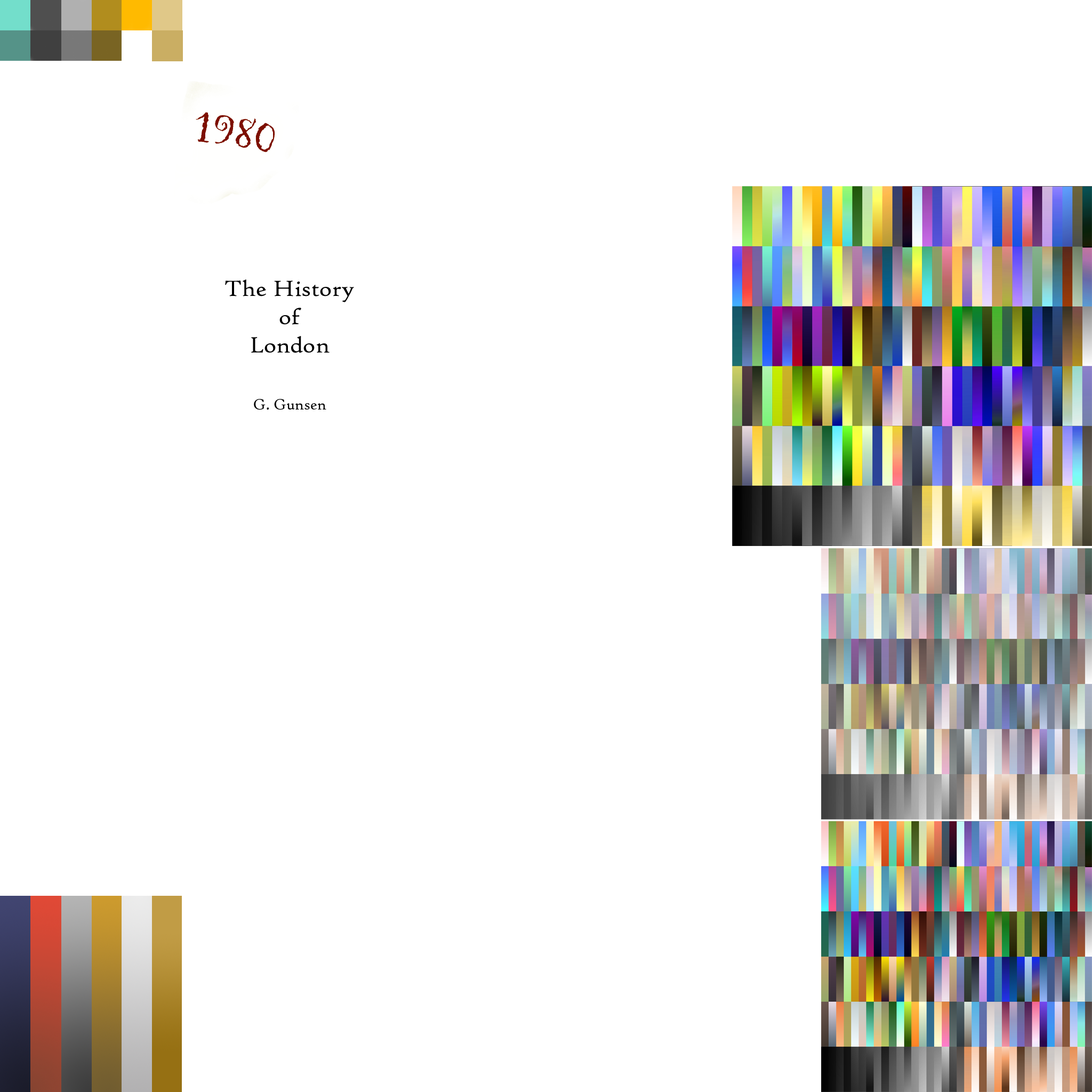
<style>
.page{position:relative;width:1092px;height:1092px;background:#ffffff}
.page>*{position:absolute;margin:0}
.t1{font:23.6px "HighTowerText-Reg";color:#000000;scale:1.05 1}
.t2{font:16px "HighTowerText-Reg";color:#000000}
</style>
<div class="page">
<p class="t1" style="left:225px;top:279px;width:129px;height:74px;text-align:center">The History<br>of <br>London</p>
<p class="t2" style="left:254px;top:399px;width:72px;height:11px">G. Gunsen</p>
</div>
